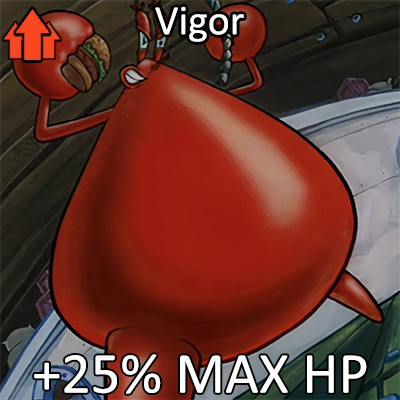
<style>
.page{position:relative;width:400px;height:400px}
.page>*{position:absolute;margin:0}
.t1{font:72px "Calibri";color:#ffffff}
.t2{font:100px "Calibri";color:#ffffff}
</style>
<div class="page">
<p class="t1" style="left:155px;top:6px;width:89px;height:36px">Vigor</p>
<p class="t2" style="left:34px;top:354px;width:333px;height:40px">+25% MAX HP</p>
</div>
